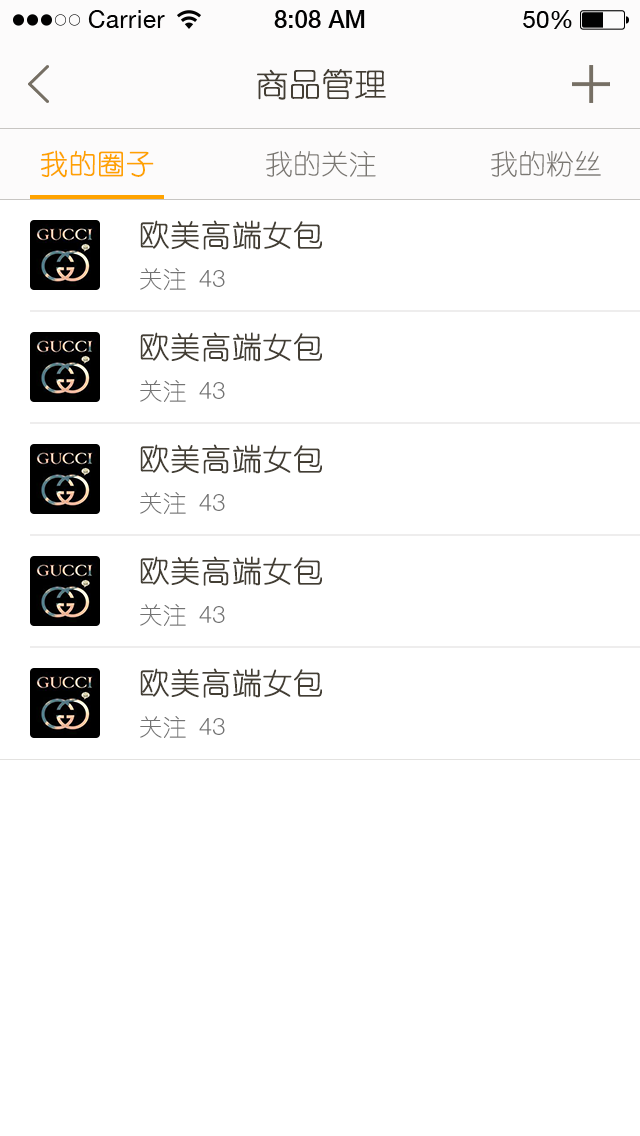
<style>
.page{position:relative;width:640px;height:1136px;background:#ffffff}
.page>*{position:absolute;margin:0}
.t1{font:32px "YouYuan";color:#433d33;text-transform:uppercase;font-weight:bold}
.t2{font:28px "YouYuan";color:#fea200;text-transform:uppercase;font-weight:bold}
.t3{font:28px "YouYuan";color:#7a7772;text-transform:uppercase}
.t4{font:30px "YouYuan";color:#433e34;text-transform:uppercase;font-weight:bold}
.t5{font:24px "YouYuan";color:#737373;text-transform:uppercase}
.t6{font:24px "HelveticaNeueLTPro-Lt";color:#737373;text-transform:uppercase}
</style>
<div class="page">
<p class="t1" style="left:257px;top:69px;width:129px;height:31px">商品管理</p>
<p class="t2" style="left:40px;top:150px;width:114px;height:28px">我的圈子</p>
<p class="t3" style="left:266px;top:150px;width:110px;height:27px">我的关注</p>
<p class="t3" style="left:491px;top:150px;width:110px;height:27px">我的粉丝</p>
<p class="t4" style="left:140px;top:220px;width:182px;height:30px">欧美高端女包</p>
<p class="t5" style="left:140px;top:268px;width:85px;height:22px">关注 <span class="t6">43</span></p>
<p class="t4" style="left:140px;top:332px;width:182px;height:30px">欧美高端女包</p>
<p class="t5" style="left:140px;top:380px;width:85px;height:22px">关注 <span class="t6">43</span></p>
<p class="t4" style="left:140px;top:444px;width:182px;height:30px">欧美高端女包</p>
<p class="t5" style="left:140px;top:492px;width:85px;height:22px">关注 <span class="t6">43</span></p>
<p class="t4" style="left:140px;top:556px;width:182px;height:30px">欧美高端女包</p>
<p class="t5" style="left:140px;top:604px;width:85px;height:22px">关注 <span class="t6">43</span></p>
<p class="t4" style="left:140px;top:668px;width:182px;height:30px">欧美高端女包</p>
<p class="t5" style="left:140px;top:716px;width:85px;height:22px">关注 <span class="t6">43</span></p>
</div>
